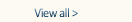
<style>
.page{position:relative;width:132px;height:22px;background:#fdfaf2}
.page>*{position:absolute;margin:0}
.t1{font:13px "Calibri";letter-spacing:-0.04em;scale:0.94 1}
</style>
<div class="page">
<p class="t1" style="left:34px;top:8px;width:35px;height:9px">View all</p>
<p class="t1" style="left:72px;top:10px;width:6px;height:7px">&gt;</p>
</div>
